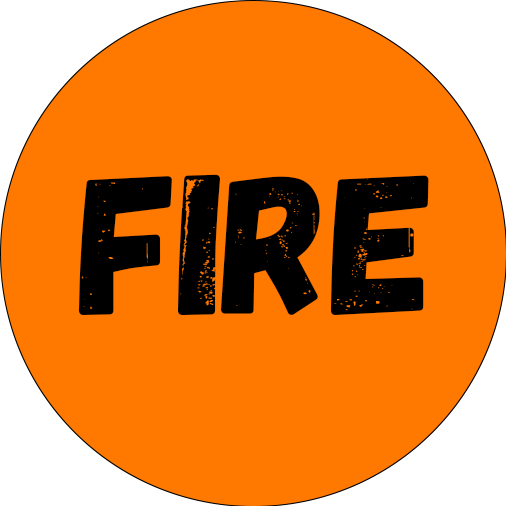
<style>
.page{position:relative;width:506px;height:506px;background:#ff7800}
.page>*{position:absolute;margin:0}
.t1{font:200px "Gagalin-Regular";color:#000000}
</style>
<div class="page">
<p class="t1" style="left:78px;top:174px;width:351px;height:141px">Fire</p>
</div>
